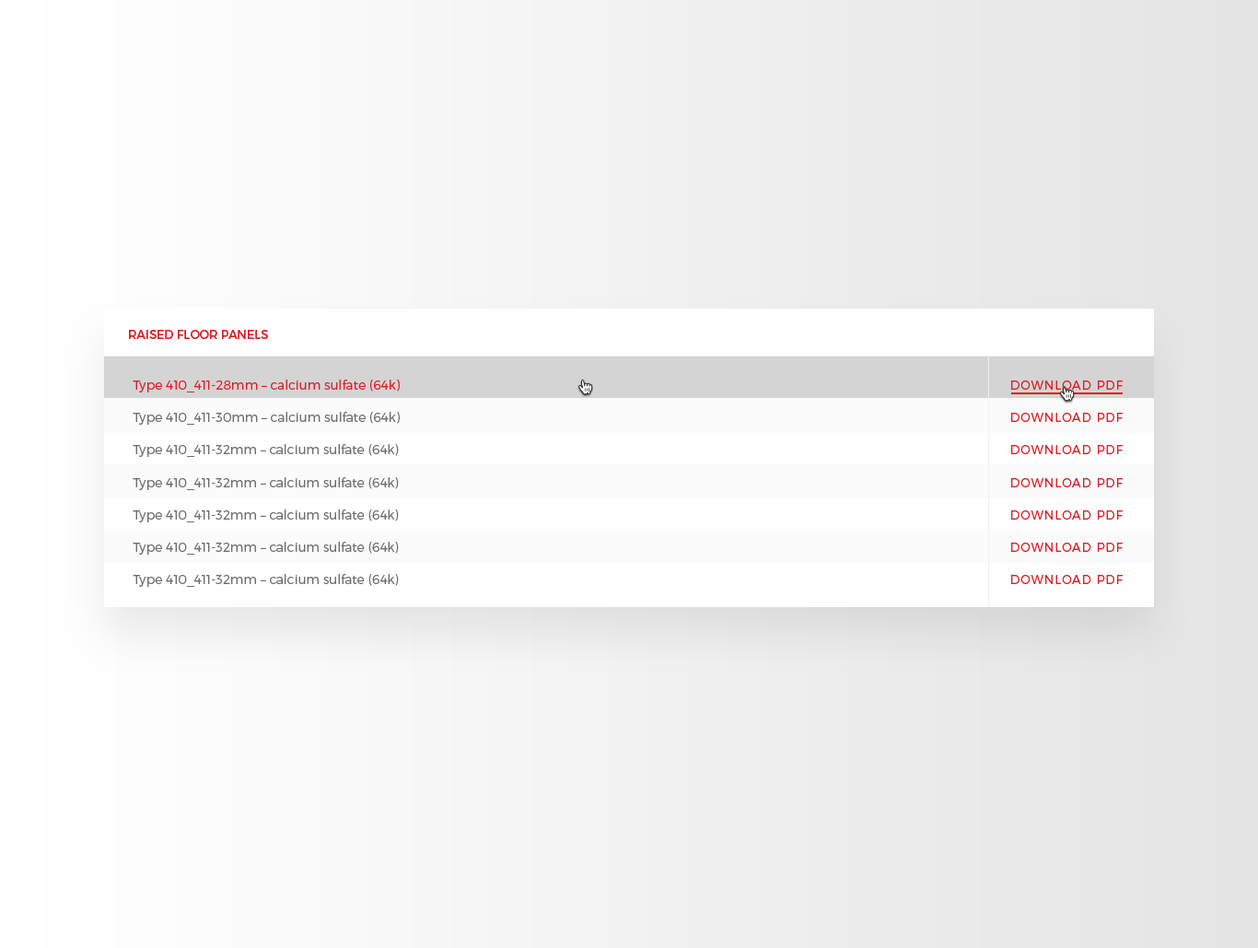
<style>
.page{position:relative;width:1258px;height:948px}
.page>*{position:absolute;margin:0}
.t1{font:12px "Montserrat-Regular";color:#dc1f26;text-transform:uppercase}
.t2{font:12.9px "Montserrat-Light";color:#dc1f26}
.t3{font:12px "Montserrat-Light";letter-spacing:0.08em;color:#dc1f26;text-transform:uppercase}
.t4{font:12.9px "Montserrat-Light";color:#6d6d6d}
</style>
<div class="page">
<p class="t1" style="left:129px;top:330px;width:139px;height:9px">Raised Floor Panels</p>
<p class="t2" style="left:133px;top:379px;width:267px;height:13px">Type 410_411-28mm – calcium sulfate (64k)</p>
<p class="t3" style="left:1011px;top:380px;width:112px;height:10px">Download PDF</p>
<p class="t4" style="left:133px;top:412px;width:267px;height:13px">Type 410_411-30mm – calcium sulfate (64k)</p>
<p class="t3" style="left:1011px;top:413px;width:112px;height:9px">Download PDF</p>
<p class="t4" style="left:133px;top:444px;width:266px;height:13px">Type 410_411-32mm – calcium sulfate (64k)</p>
<p class="t3" style="left:1011px;top:445px;width:112px;height:9px">Download PDF</p>
<p class="t4" style="left:133px;top:477px;width:266px;height:13px">Type 410_411-32mm – calcium sulfate (64k)</p>
<p class="t3" style="left:1011px;top:478px;width:112px;height:9px">Download PDF</p>
<p class="t4" style="left:133px;top:509px;width:266px;height:13px">Type 410_411-32mm – calcium sulfate (64k)</p>
<p class="t3" style="left:1011px;top:510px;width:112px;height:9px">Download PDF</p>
<p class="t4" style="left:133px;top:542px;width:266px;height:12px">Type 410_411-32mm – calcium sulfate (64k)</p>
<p class="t3" style="left:1011px;top:542px;width:112px;height:10px">Download PDF</p>
<p class="t4" style="left:133px;top:574px;width:266px;height:13px">Type 410_411-32mm – calcium sulfate (64k)</p>
<p class="t3" style="left:1011px;top:575px;width:112px;height:9px">Download PDF</p>
</div>
